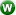
<style>
.page{position:relative;width:16px;height:15px}
.page>*{position:absolute;margin:0}
.t1{font:10px "ArialMT";color:#ffffff;font-weight:bold}
</style>
<div class="page">
<p class="t1" style="left:2px;top:4px;width:10px;height:8px">W</p>
</div>
